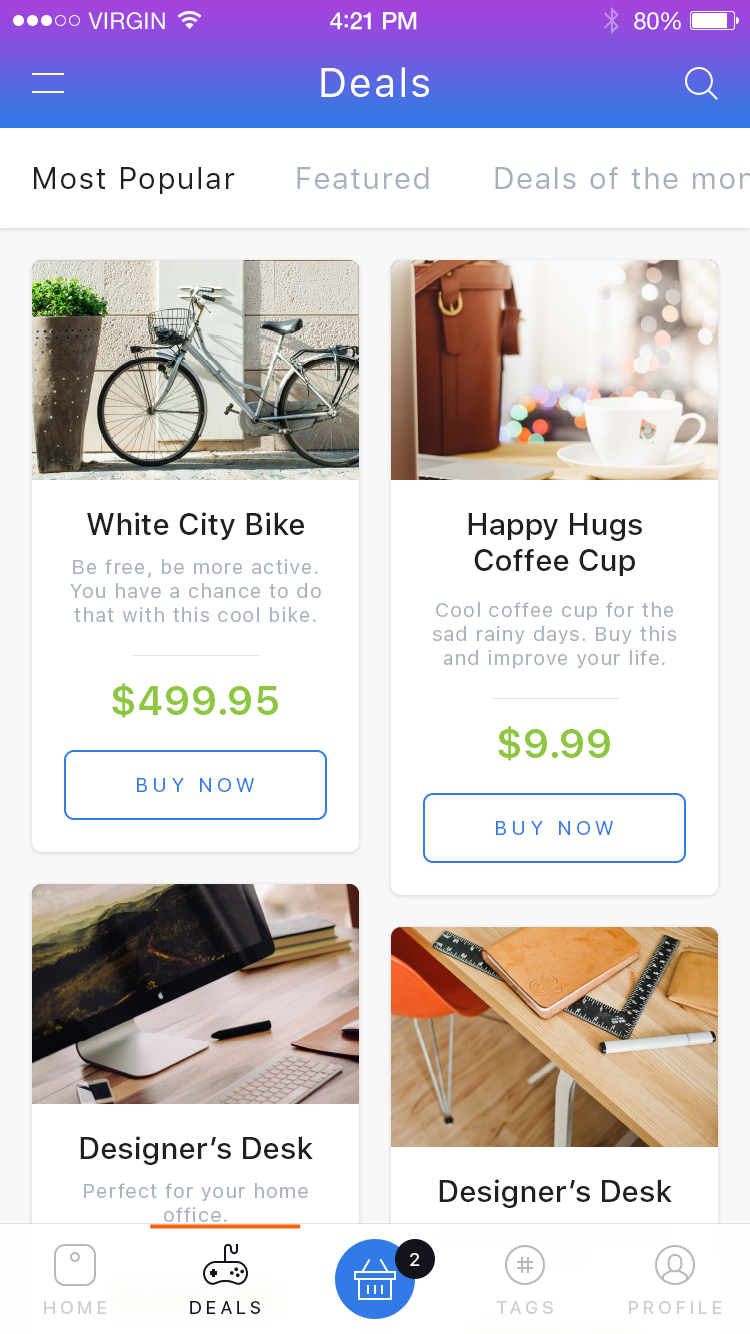
<style>
.page{position:relative;width:750px;height:1334px;background:#ffffff}
.page>*{position:absolute;margin:0}
.t1{font:40px "SFUIText-Regular";letter-spacing:0.05em;color:#ffffff}
.t2{font:30px "SFUIText-Regular";letter-spacing:0.05em;color:#1e2024}
.t3{font:30px "SFUIText-Regular";letter-spacing:0.05em;color:#a6b0bd}
.t4{font:30px "SFUIText-Medium";color:#1e2024}
.t5{font:20px "SFUIText-Regular";letter-spacing:0.05em;color:#a6b0bd}
.t6{font:40px "SFUIText-Semibold";color:#8dc63f}
.t7{font:20px "SFUIText-Regular";letter-spacing:0.2em;color:#327ae5;text-transform:uppercase}
.t8{font:18px "SFUIText-Regular";color:#ffffff;text-transform:uppercase}
.t9{font:18px "SFUIText-Regular";letter-spacing:0.2em;color:#cccccd;text-transform:uppercase}
.t10{font:18px "SFUIText-Regular";letter-spacing:0.2em;color:#13131c;text-transform:uppercase}
</style>
<div class="page">
<p class="t1" style="left:321px;top:67px;width:108px;height:30px">Deals</p>
<p class="t2" style="left:34px;top:167px;width:201px;height:27px">Most Popular</p>
<p class="t3" style="left:297px;top:167px;width:132px;height:22px">Featured</p>
<p class="t4" style="left:87px;top:512px;width:217px;height:28px">White City Bike</p>
<p class="t4" style="left:468px;top:513px;width:174px;height:63px;text-align:center">Happy Hugs Coffee Cup</p>
<p class="t5" style="left:70px;top:559px;width:251px;height:63px;text-align:center">Be free, be more active. You have a chance to do that with this cool bike.</p>
<p class="t5" style="left:433px;top:602px;width:243px;height:67px;text-align:center">Cool coffee cup for the sad rainy days. Buy this and improve your life.</p>
<p class="t6" style="left:112px;top:683px;width:166px;height:35px">$499.95</p>
<p class="t6" style="left:498px;top:726px;width:112px;height:35px">$9.99</p>
<p class="t7" style="left:137px;top:778px;width:117px;height:14px">buy now</p>
<p class="t7" style="left:496px;top:821px;width:117px;height:14px">buy now</p>
<p class="t4" style="left:80px;top:1136px;width:233px;height:29px">Designer’s Desk</p>
<p class="t4" style="left:439px;top:1179px;width:233px;height:29px">Designer’s Desk</p>
<p class="t5" style="left:84px;top:1183px;width:224px;height:39px;text-align:center">Perfect for your home office.</p>
<p class="t8" style="left:410px;top:1253px;width:10px;height:13px">2</p>
<p class="t9" style="left:44px;top:1301px;width:63px;height:13px">home</p>
<p class="t10" style="left:190px;top:1301px;width:70px;height:13px">deals</p>
<p class="t9" style="left:496px;top:1301px;width:57px;height:13px">tags</p>
<p class="t9" style="left:629px;top:1301px;width:93px;height:13px">profile</p>
</div>
